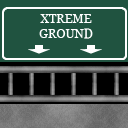
<style>
.page{position:relative;width:128px;height:128px;background:#205340}
.page>*{position:absolute;margin:0}
.t1{font:12px "Georgia";color:#ffffff}
</style>
<div class="page">
<p class="t1" style="left:39px;top:14px;width:54px;height:25px;text-align:center">XTREME<br>GROUND</p>
</div>
